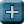
<style>
.page{position:relative;width:24px;height:24px}
.page>*{position:absolute;margin:0}
.t1{font:22px "HoboStd";color:#b5ccd8;scale:1.2 1}
</style>
<div class="page">
<p class="t1" style="left:6px;top:6px;width:13px;height:13px">+</p>
</div>
